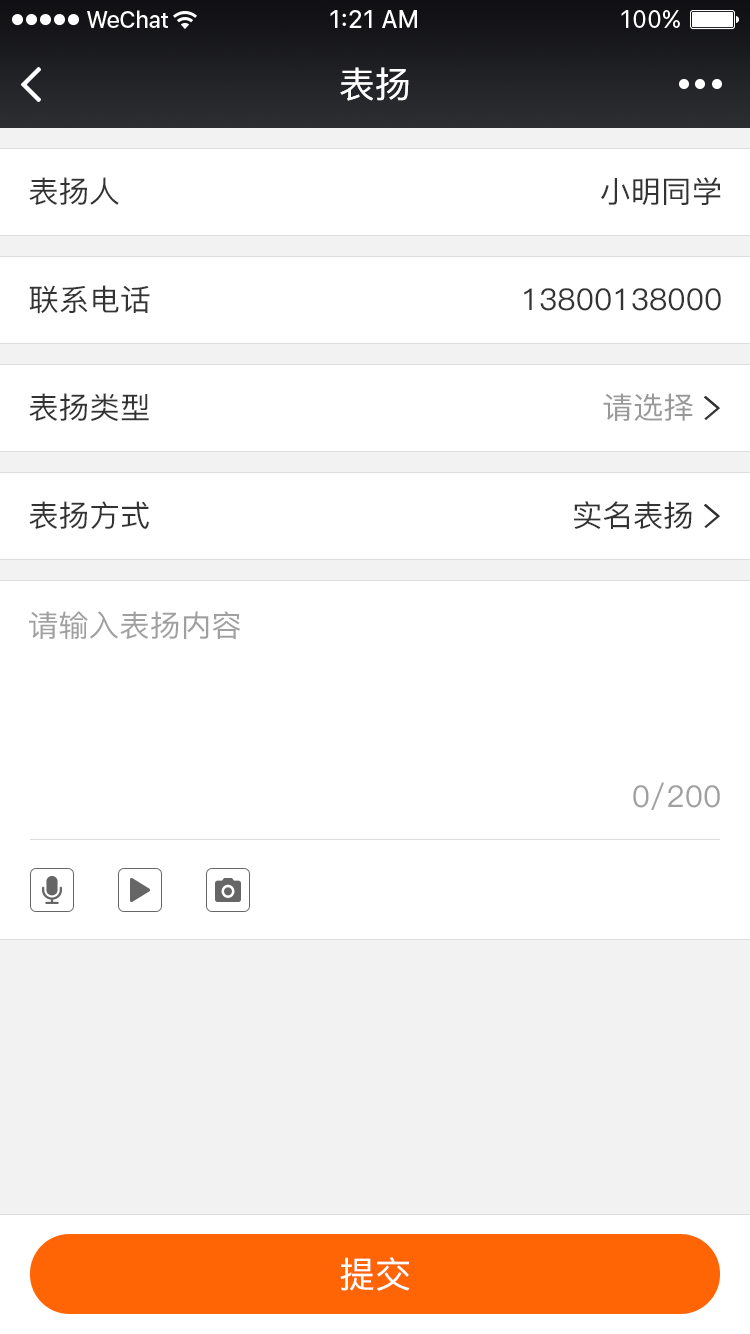
<style>
.page{position:relative;width:750px;height:1334px;background:#ffffff}
.page>*{position:absolute;margin:0}
.t1{font:36px "PingFang-SC-Medium";color:#ffffff}
.t2{font:30px "PingFang-SC-Medium";color:#333333}
.t3{font:30px "PingFang-SC-Medium";color:#999999}
.t4{font:30px "PingFang-SC-Medium";color:#a0a0a0}
</style>
<div class="page">
<p class="t1" style="left:340px;top:67px;width:69px;height:34px">表扬</p>
<p class="t2" style="left:29px;top:177px;width:90px;height:28px">表扬人</p>
<p class="t2" style="left:601px;top:177px;width:120px;height:28px">小明同学</p>
<p class="t2" style="left:29px;top:285px;width:121px;height:29px">联系电话</p>
<p class="t2" style="left:524px;top:288px;width:197px;height:23px">13800138000</p>
<p class="t2" style="left:29px;top:393px;width:120px;height:28px">表扬类型</p>
<p class="t3" style="left:603px;top:393px;width:90px;height:28px">请选择</p>
<p class="t2" style="left:29px;top:501px;width:120px;height:28px">表扬方式</p>
<p class="t2" style="left:574px;top:501px;width:118px;height:29px">实名表扬</p>
<p class="t4" style="left:29px;top:611px;width:212px;height:28px">请输入表扬内容</p>
<p class="t4" style="left:633px;top:782px;width:87px;height:28px">0/200</p>
<p class="t1" style="left:340px;top:1257px;width:70px;height:34px">提交</p>
</div>
